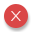
<style>
.page{position:relative;width:32px;height:32px;background:#ffffff}
.page>*{position:absolute;margin:0}
.t1{font:14.2px "Panton-LightCaps";letter-spacing:0.075em;scale:1.12 1}
</style>
<div class="page">
<p class="t1" style="left:11px;top:11px;width:10px;height:10px">X</p>
</div>
